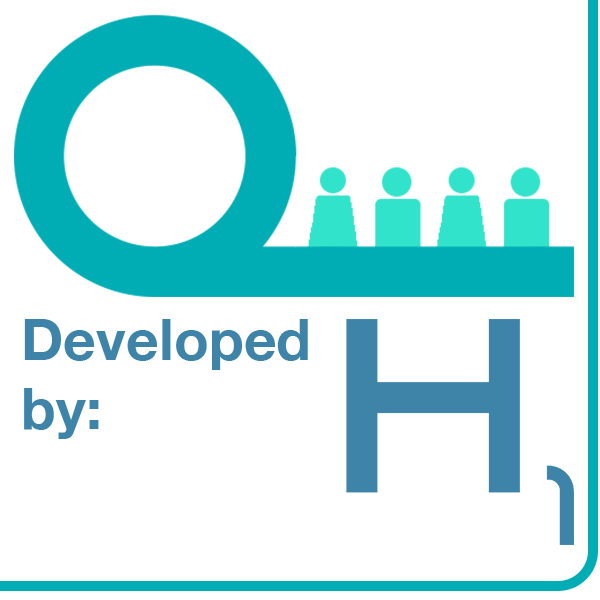
<style>
.page{position:relative;width:600px;height:600px;background:#ffffff}
.page>*{position:absolute;margin:0}
.t1{font:57.2px "HelveticaNeue-Bold";color:#3d84a8}
</style>
<div class="page">
<p class="t1" style="left:24px;top:319px;width:284px;height:120px">Developed<br>by:</p>
</div>
